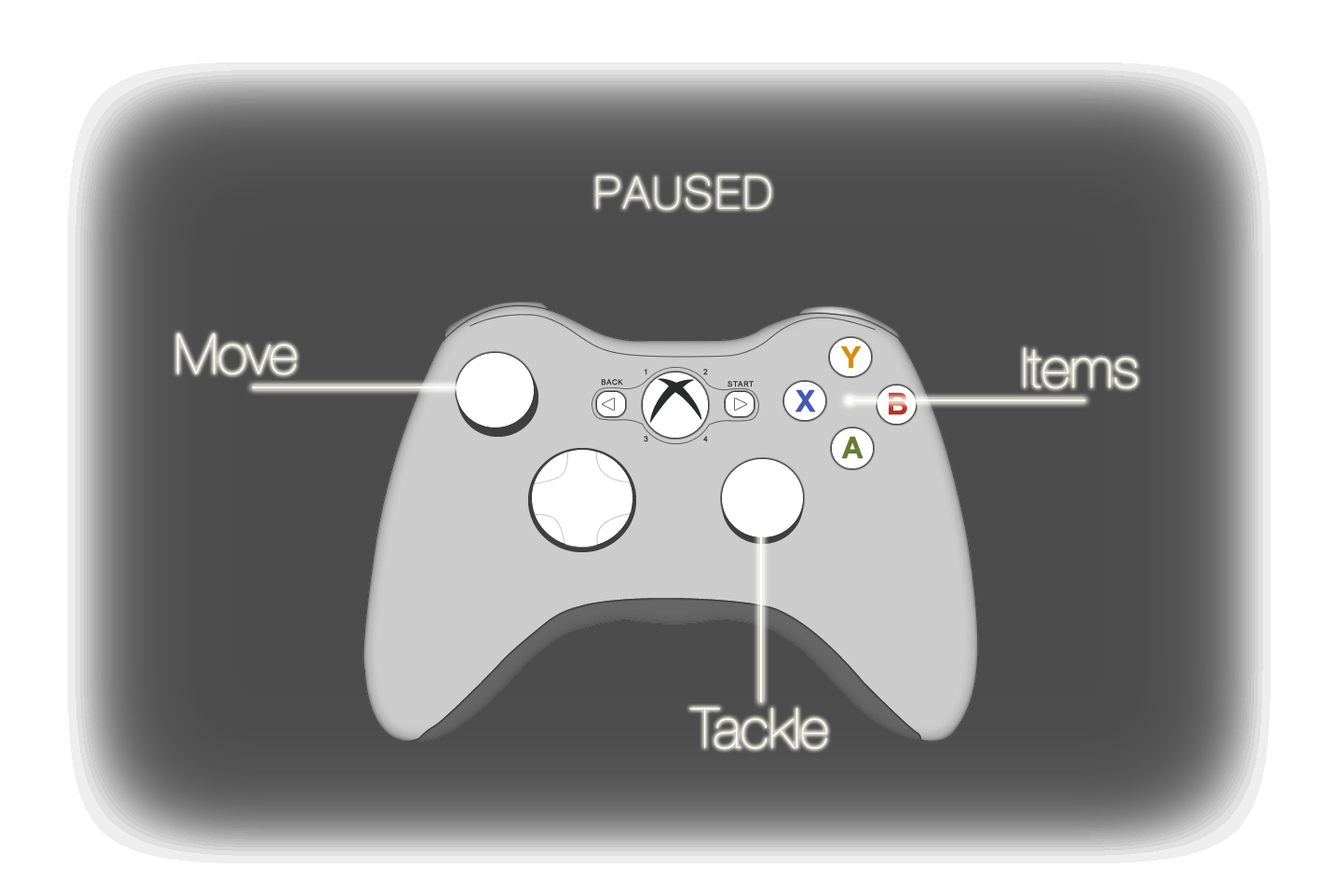
<style>
.page{position:relative;width:1333px;height:894px;background:#ffffff}
.page>*{position:absolute;margin:0}
.t1{font:44.7px "HelveticaNeue-UltraLight";color:#ffffff}
.t2{font:55.9px "HelveticaNeue-UltraLight";color:#ffffff}
.t3{font:55.5px "HelveticaNeue-UltraLight";color:#ffffff}
</style>
<div class="page">
<p class="t1" style="left:596px;top:175px;width:175px;height:35px">P A U S E D</p>
<p class="t2" style="left:177px;top:334px;width:120px;height:41px">Move</p>
<p class="t3" style="left:1024px;top:348px;width:114px;height:41px">Items</p>
<p class="t2" style="left:689px;top:708px;width:138px;height:41px">Tackle</p>
</div>
